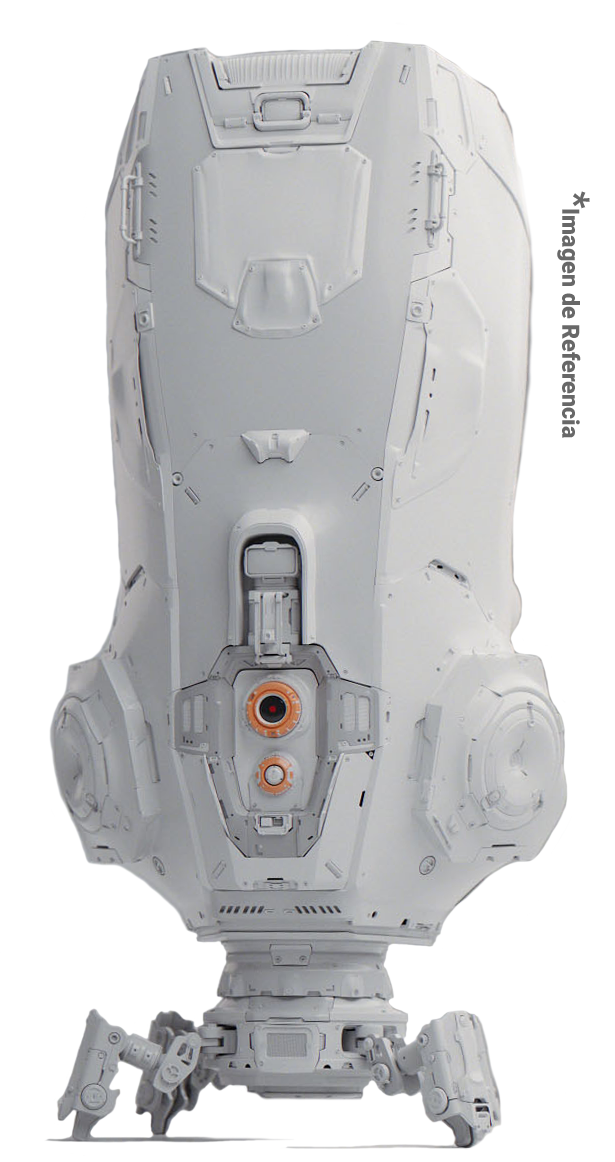
<style>
.page{position:relative;width:615px;height:1162px;background:#ffffff}
.page>*{position:absolute;margin:0}
.t1{font:23.9px "Roboto-Black";color:#686868}
.t2{font:38.2px "Roboto-Black";color:#686868}
</style>
<div class="page">
<p class="t1" style="left:557px;top:191px;width:33px;height:247px;rotate:90deg"><span class="t2">*</span>Imagen de Referencia</p>
</div>
